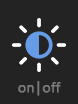
<style>
.page{position:relative;width:78px;height:104px;background:#232323}
.page>*{position:absolute;margin:0}
.t1{font:14px "SegoeUI";color:#7c7c7c;font-weight:bold}
.t2{font:14px "SegoeUI";letter-spacing:0.14em;color:#7c7c7c;font-weight:bold}
</style>
<div class="page">
<p class="t1" style="left:18px;top:81px;width:43px;height:15px">o<span class="t2">n|</span>off</p>
</div>
